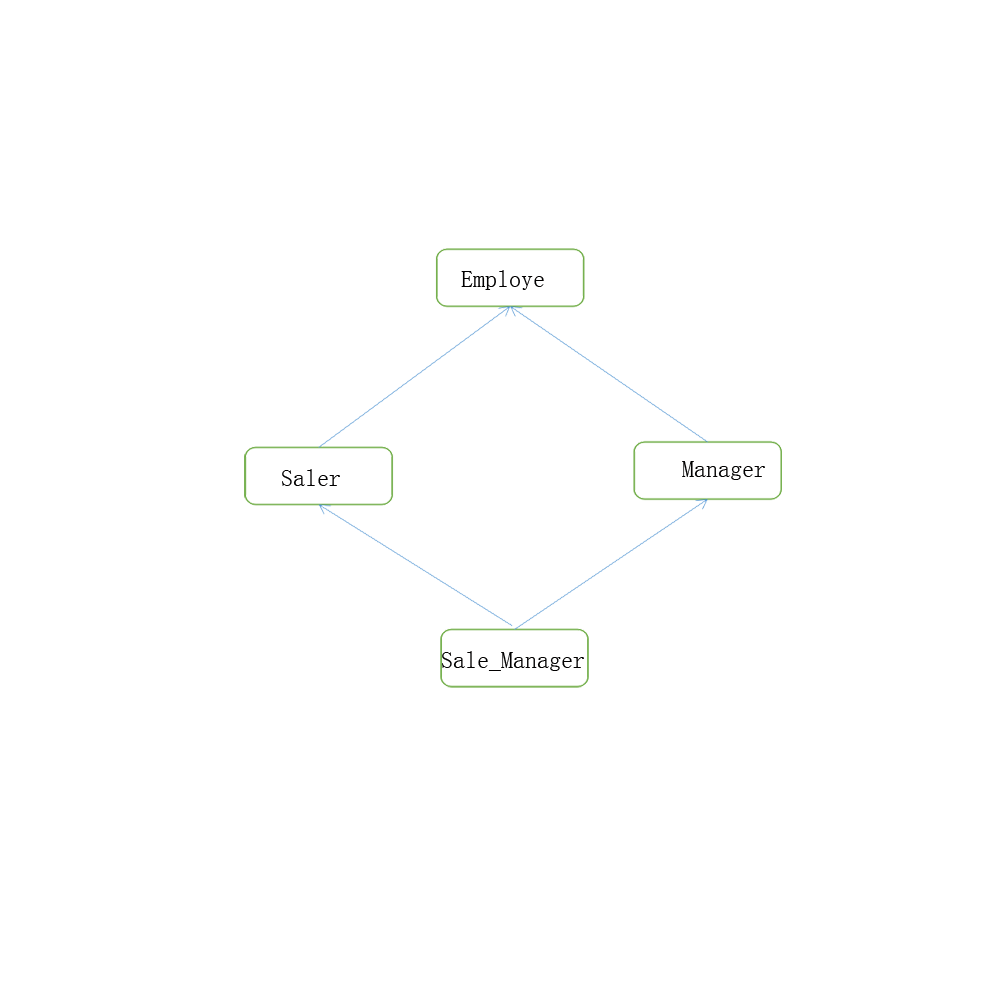
<style>
.page{position:relative;width:1000px;height:1000px;background:#ffffff}
.page>*{position:absolute;margin:0}
.t1{font:24px "SimSun";color:#010000}
</style>
<div class="page">
<p class="t1" style="left:461px;top:270px;width:83px;height:20px">Employe</p>
<p class="t1" style="left:682px;top:461px;width:83px;height:19px">Manager</p>
<p class="t1" style="left:282px;top:469px;width:58px;height:17px">Saler</p>
<p class="t1" style="left:442px;top:651px;width:142px;height:20px">Sale_Manager</p>
</div>
